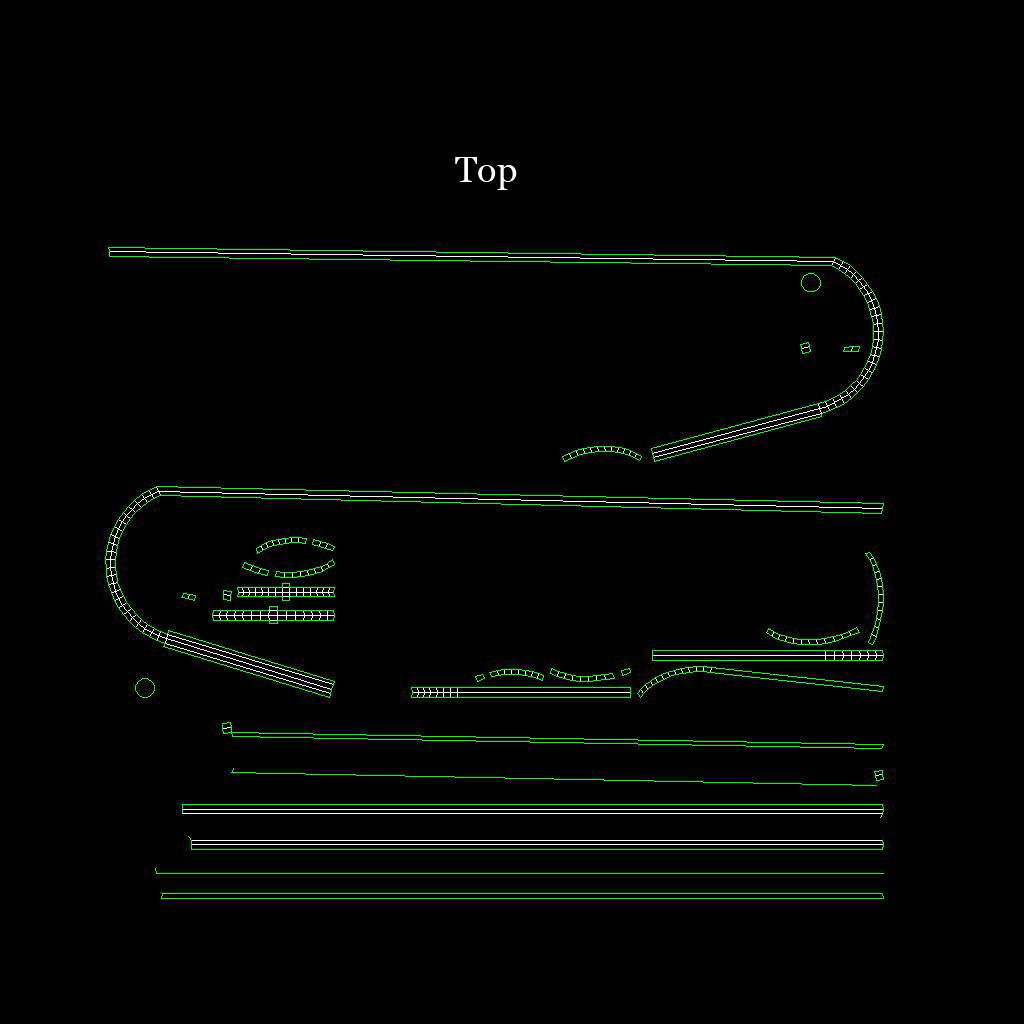
<style>
.page{position:relative;width:1024px;height:1024px;background:#000000}
.page>*{position:absolute;margin:0}
.t1{font:36px "Georgia";color:#ffffff}
</style>
<div class="page">
<p class="t1" style="left:455px;top:157px;width:62px;height:33px">Top</p>
</div>
